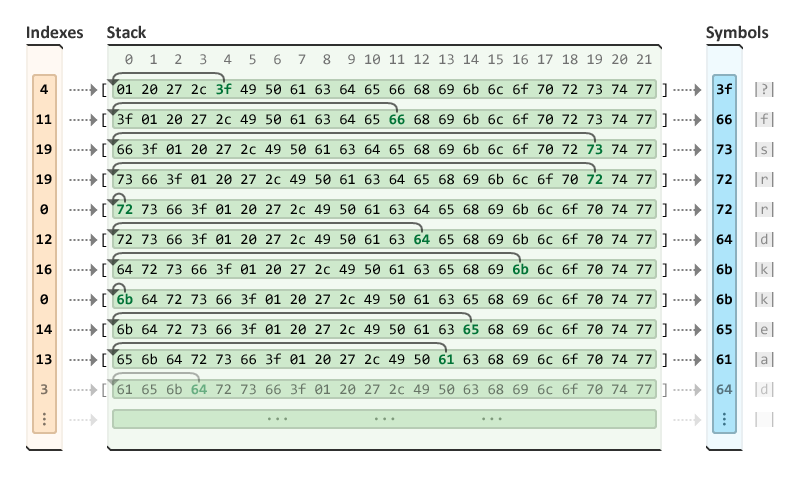
<style>
.page{position:relative;width:799px;height:477px;background:#ffffff}
.page>*{position:absolute;margin:0}
.t1{font:18px "Calibri-Bold";color:#333333}
.t2{font:15px/30px "Consolas";color:#000000}
.t3{font:15px/30px "Consolas";color:#707070}
.t4{font:15px/30px "Consolas-Bold";color:#007236}
.t5{font:15px/30px "Consolas-Bold";color:#000000}
.t6{font:15px/30px "Consolas";color:#898989}
.t7{font:15px "Consolas-Bold";color:#7f7264}
.t8{font:15px "Consolas";color:#677466}
.t9{font:15px "Consolas-Bold";color:#677466}
.t10{font:15px "Consolas-Bold";color:#57727d}
.t11{font:15px/30px "Consolas";color:#bfbfbf}
.t12{font:15px "Consolas-Bold";letter-spacing:-0.22em;color:#7f7264}
.t13{font:15px "Consolas-Bold";letter-spacing:-0.22em;color:#3c7388}
.t14{font:15px "Consolas-Bold";color:#7e997c}
</style>
<div class="page">
<p class="t1" style="left:27px;top:25px;width:56px;height:14px">Indexes</p>
<p class="t1" style="left:107px;top:25px;width:39px;height:14px">Stack</p>
<p class="t1" style="left:706px;top:25px;width:63px;height:17px">Symbols</p>
<p class="t2" style="left:102px;top:54px;width:565px;height:313px"><span class="t3">0  1  2  3  4  5  6  7  8  9 10 11 12 13 14 15 16 17 18 19 20 21<br></span>[ 01 20 27 2c <span class="t4">3f</span> 49 50 61 63 64 65 66 68 69 6b 6c 6f 70 72 73 74 77 ]<br>[ 3f 01 20 27 2c 49 50 61 63 64 65 <span class="t4">66 </span>68 69 6b 6c 6f 70 72 73 74 77 ]<br>[ 66 3f 01 20 27 2c 49 50 61 63 64 65 68 69 6b 6c 6f 70 72 <span class="t4">73</span> 74 77 ]<br>[ 73 66 3f 01 20 27 2c 49 50 61 63 64 65 68 69 6b 6c 6f 70 <span class="t4">72</span> 74 77 ]<br>[ <span class="t4">72</span> 73 66 3f 01 20 27 2c 49 50 61 63 64 65 68 69 6b 6c 6f 70 74 77 ]<br>[ 72 73 66 3f 01 20 27 2c 49 50 61 63 <span class="t4">64</span> 65 68 69 6b 6c 6f 70 74 77 ]<br>[ 64 72 73 66 3f 01 20 27 2c 49 50 61 63 65 68 69 <span class="t4">6b</span> 6c 6f 70 74 77 ]<br>[ <span class="t4">6b</span> 64 72 73 66 3f 01 20 27 2c 49 50 61 63 65 68 69 6c 6f 70 74 77 ]<br>[ 6b 64 72 73 66 3f 01 20 27 2c 49 50 61 63 <span class="t4">65</span> 68 69 6c 6f 70 74 77 ]<br>[ 65 6b 64 72 73 66 3f 01 20 27 2c 49 50 <span class="t4">61</span> 63 68 69 6c 6f 70 74 77 ]</p>
<p class="t5" style="left:36px;top:84px;width:16px;height:281px;text-align:center">4<br>11<br>19<br>19<br>0<br>12<br>16<br>0<br>14<br>13</p>
<p class="t5" style="left:716px;top:83px;width:17px;height:282px">3f<br>66<br>73<br>72<br>72<br>64<br>6b<br>6b<br>65<br>61</p>
<p class="t6" style="left:755px;top:82px;width:19px;height:285px">|?|<br>|f|<br>|s|<br>|r|<br>|r|<br>|d|<br>|k|<br>|k|<br>|e|<br>|a|</p>
<p class="t7" style="left:41px;top:384px;width:7px;height:11px">3</p>
<p class="t8" style="left:102px;top:383px;width:565px;height:14px">[ 61 65 6b <span class="t9">64</span> 72 73 66 3f 01 20 27 2c 49 50 63 68 69 6c 6f 70 74 77 ]</p>
<p class="t10" style="left:716px;top:384px;width:17px;height:11px">64</p>
<p class="t11" style="left:755px;top:382px;width:19px;height:45px">|d|<br>| |</p>
<p class="t12" style="left:43px;top:412px;width:3px;height:14px;rotate:90deg">...</p>
<p class="t13" style="left:723px;top:412px;width:3px;height:14px;rotate:90deg">...</p>
<p class="t14" style="left:268px;top:417px;width:234px;height:4px">...          ...          ...</p>
</div>
